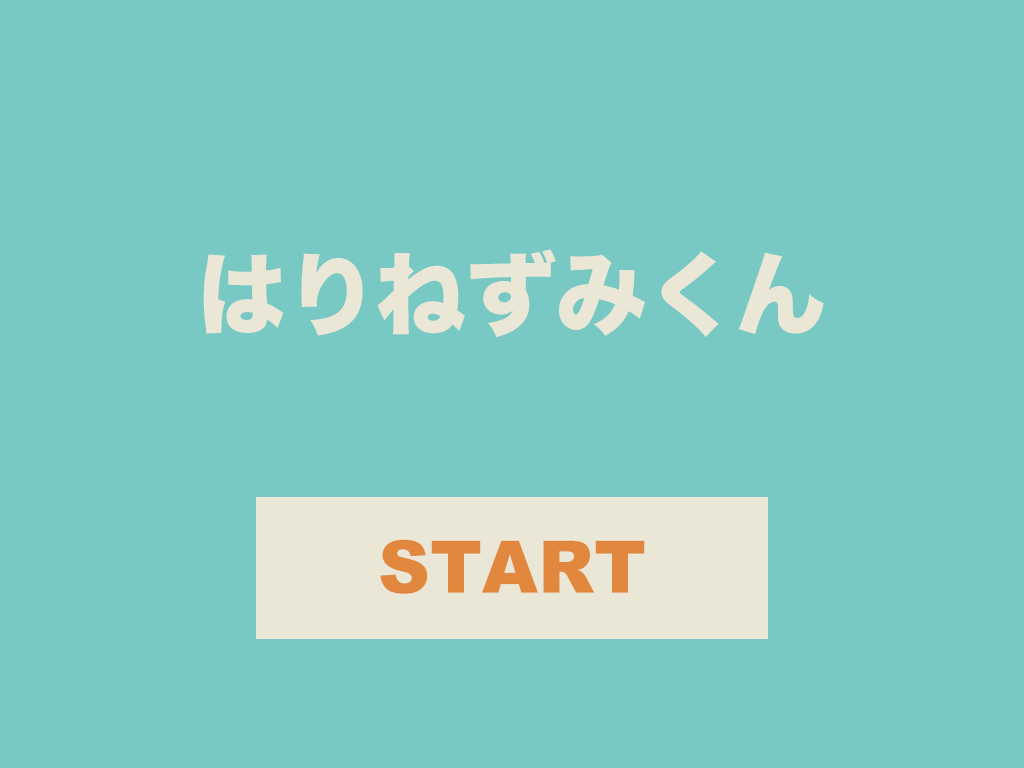
<style>
.page{position:relative;width:1024px;height:768px;background:#78c9c3}
.page>*{position:absolute;margin:0}
.t1{font:90px "HiraKakuStd-W8";color:#ebe7d6}
</style>
<div class="page">
<p class="t1" style="left:203px;top:249px;width:621px;height:89px">はりねずみくん</p>
</div>
